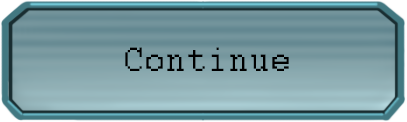
<style>
.page{position:relative;width:407px;height:122px}
.page>*{position:absolute;margin:0}
.t1{font:37.5px "Courier";color:#000000}
</style>
<div class="page">
<p class="t1" style="left:125px;top:47px;width:164px;height:24px">Continue</p>
</div>
